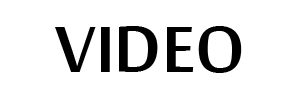
<style>
.page{position:relative;width:300px;height:100px;background:#ffffff}
.page>*{position:absolute;margin:0}
.t1{font:100px "MoolBoran";color:#000000}
</style>
<div class="page">
<p class="t1" style="left:55px;top:26px;width:187px;height:47px">VIDEO</p>
</div>
